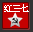
<style>
.page{position:relative;width:33px;height:32px;background:#c50000}
.page>*{position:absolute;margin:0}
.t1{font:10.4px "SimSun";letter-spacing:-0.25em;color:#ffffff}
</style>
<div class="page">
<p class="t1" style="left:4px;top:4px;width:25px;height:8px">红三七</p>
</div>
